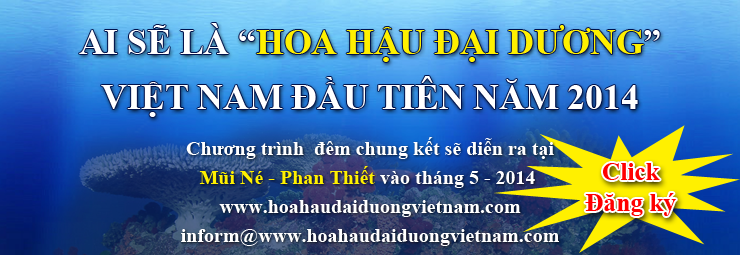
<style>
.page{position:relative;width:740px;height:255px}
.page>*{position:absolute;margin:0}
.t1{font:35.6px "TimesNewRomanPS-BoldMT";color:#ffffff;text-transform:uppercase}
.t2{font:35.6px "TimesNewRomanPS-BoldMT";color:#fff000;text-transform:uppercase}
.t3{font:20px "TimesNewRomanPS-BoldMT";color:#ffffff}
.t4{font:20px "TimesNewRomanPS-BoldMT";color:#fff000}
.t5{font:25.3px "TimesNewRomanPS-BoldMT";color:#ff0000}
</style>
<div class="page">
<p class="t1" style="left:79px;top:23px;width:581px;height:94px;text-align:center">AI SẼ LÀ “<span class="t2">hoa hẬu đại DƯƠNG</span>”<br>VIỆT NAM ĐẦU TIÊN NĂM 2014</p>
<p class="t3" style="left:181px;top:137px;width:378px;height:109px;text-align:center">Chương trình  đêm chung kết sẽ diễn ra tại<br><span class="t4">Mũi Né - Phan Thiết</span> vào tháng 5 - 2014 <br>www.hoahaudaiduongvietnam.com<br>inform@www.hoahaudaiduongvietnam.com</p>
<p class="t5" style="left:585px;top:163px;width:91px;height:53px;text-align:center">Click<br>Đăng ký</p>
</div>
